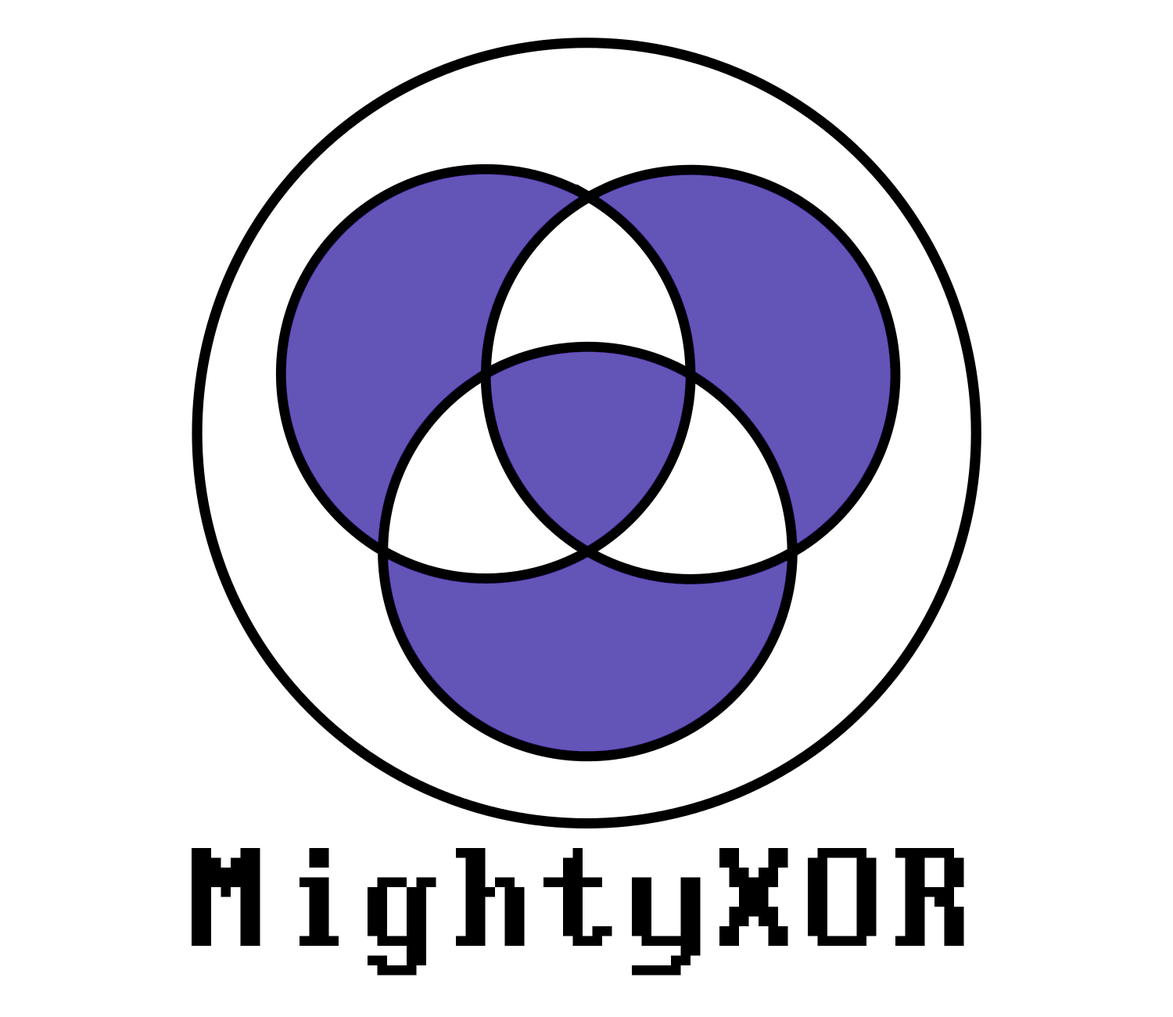
<style>
.page{position:relative;width:1173px;height:1017px;background:#ffffff}
.page>*{position:absolute;margin:0}
.t1{font:156.4px "PerfectDOSVGA437";color:#000000}
</style>
<div class="page">
<p class="t1" style="left:192px;top:848px;width:772px;height:127px">MightyXOR</p>
</div>
